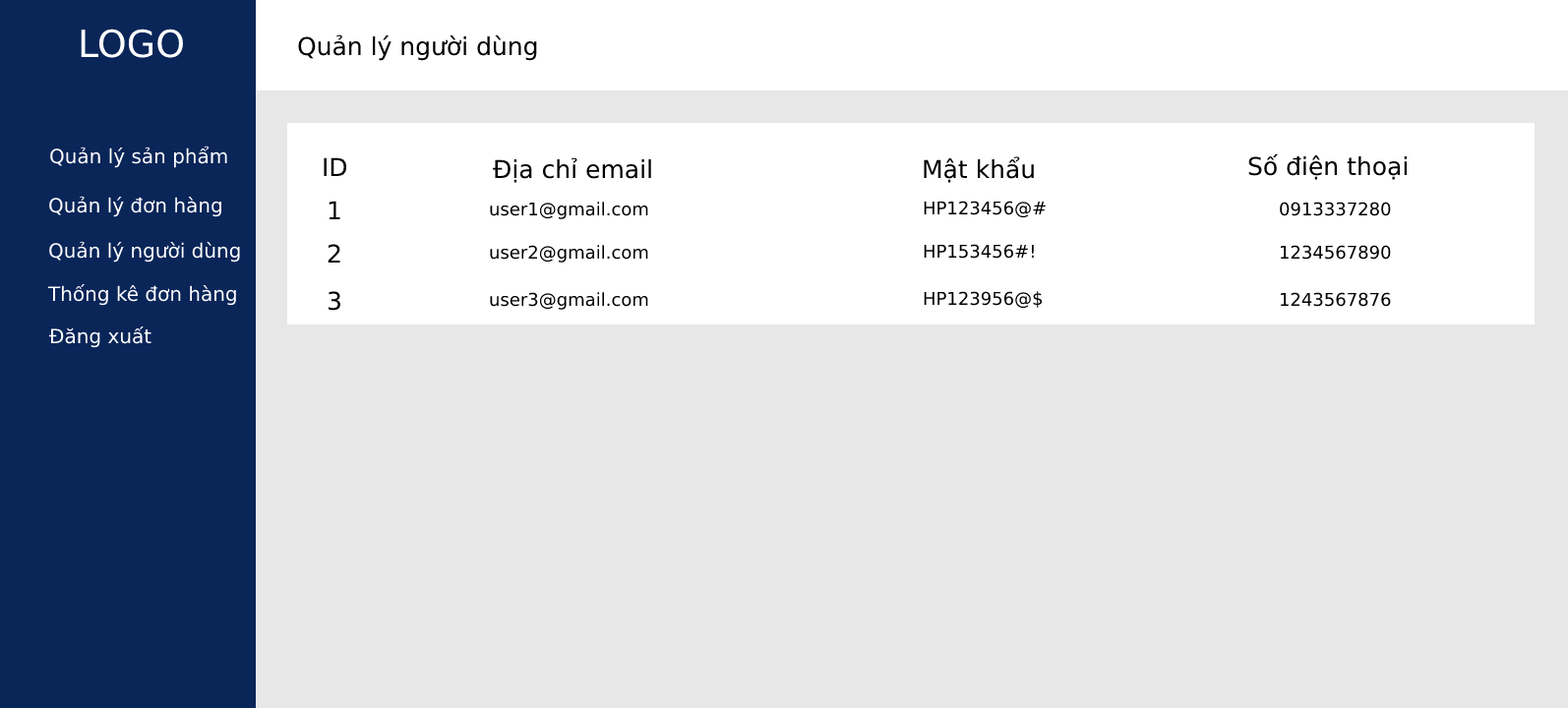
<style>
.page{position:relative;width:1568px;height:708px;background:#e7e7e7}
.page>*{position:absolute;margin:0}
.t1{font:37.4px "DejaVuSans";color:#ffffff}
.t2{font:24.6px "DejaVuSans";color:#000000}
.t3{font:19.7px "DejaVuSans";color:#ffffff}
.t4{font:17.7px "DejaVuSans";color:#000000}
</style>
<div class="page">
<p class="t1" style="left:81px;top:29px;width:102px;height:29px">LOGO</p>
<p class="t2" style="left:298px;top:34px;width:239px;height:27px">Quản lý người dùng</p>
<p class="t3" style="left:50px;top:146px;width:177px;height:22px">Quản lý sản phẩm</p>
<p class="t2" style="left:324px;top:157px;width:23px;height:19px">ID</p>
<p class="t2" style="left:493px;top:157px;width:158px;height:26px">Địa chỉ email</p>
<p class="t2" style="left:924px;top:156px;width:110px;height:27px">Mật khẩu</p>
<p class="t2" style="left:1248px;top:153px;width:159px;height:27px">Số điện thoại</p>
<p class="t3" style="left:49px;top:196px;width:172px;height:21px">Quản lý đơn hàng</p>
<p class="t2" style="left:329px;top:201px;width:11px;height:18px">1</p>
<p class="t4" style="left:490px;top:202px;width:158px;height:17px">user1@gmail.com</p>
<p class="t4" style="left:924px;top:201px;width:122px;height:17px">HP123456@#</p>
<p class="t4" style="left:1280px;top:202px;width:111px;height:14px">0913337280</p>
<p class="t3" style="left:49px;top:241px;width:191px;height:22px">Quản lý người dùng</p>
<p class="t2" style="left:328px;top:244px;width:12px;height:19px">2</p>
<p class="t4" style="left:490px;top:245px;width:158px;height:18px">user2@gmail.com</p>
<p class="t4" style="left:924px;top:244px;width:110px;height:15px">HP153456#!</p>
<p class="t4" style="left:1280px;top:245px;width:111px;height:15px">1234567890</p>
<p class="t3" style="left:47px;top:284px;width:189px;height:22px">Thống kê đơn hàng</p>
<p class="t2" style="left:328px;top:291px;width:12px;height:20px">3</p>
<p class="t4" style="left:490px;top:292px;width:158px;height:18px">user3@gmail.com</p>
<p class="t4" style="left:924px;top:291px;width:119px;height:18px">HP123956@$</p>
<p class="t4" style="left:1280px;top:292px;width:111px;height:15px">1243567876</p>
<p class="t3" style="left:49px;top:327px;width:102px;height:21px">Đăng xuất</p>
</div>
